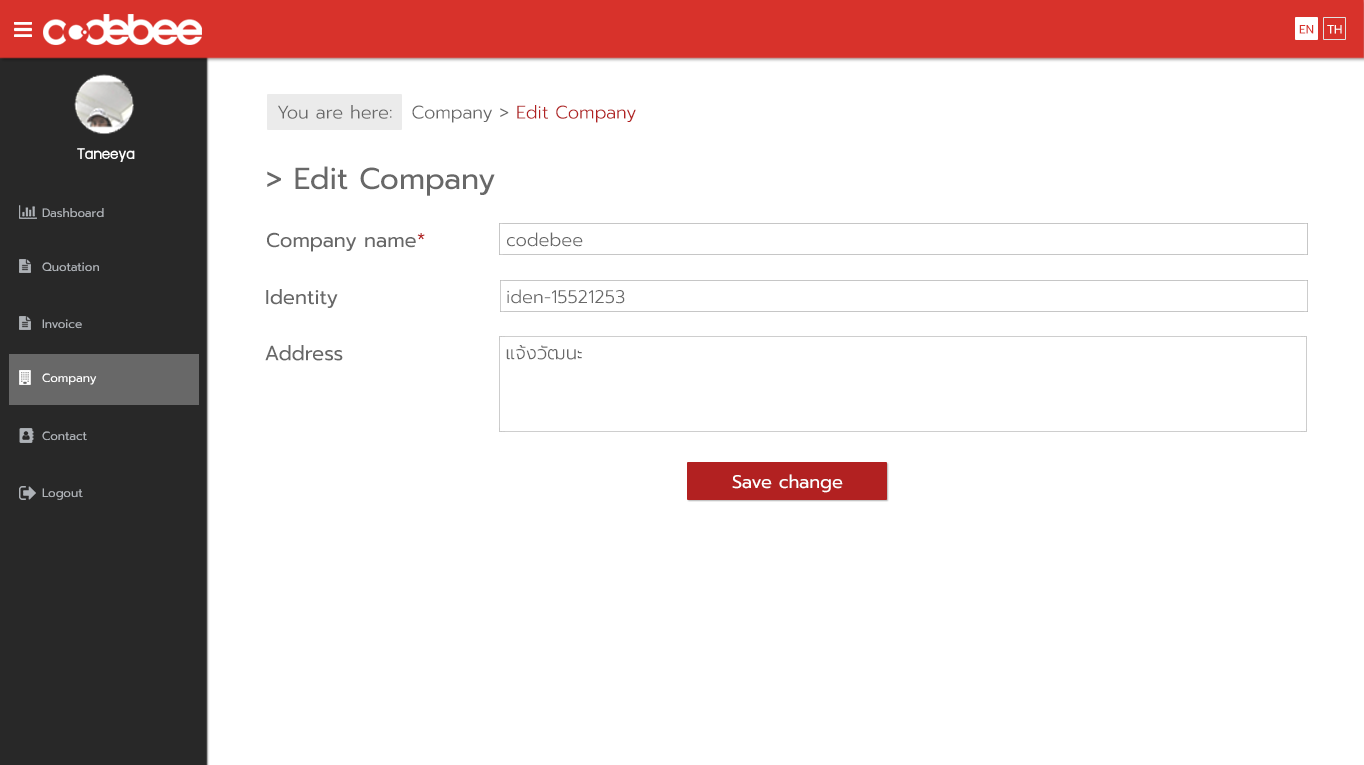
<style>
.page{position:relative;width:1364px;height:765px;background:#ffffff}
.page>*{position:absolute;margin:0}
.t1{font:12px "Prompt-Regular";color:#d8322b}
.t2{font:12px "Prompt-Regular";color:#ffffff}
.t3{font:18px "Prompt-Light";color:#686868}
.t4{font:18px "Prompt-Light";color:#b22121}
.t5{font:18px "supermarket";color:#ffffff}
.t6{font:30px "Prompt-Regular";color:#686868}
.t7{font:12px "Prompt-Regular";color:#aeb2b7}
.t8{font:20px "Prompt-Regular";color:#686868}
.t9{font:20px "Prompt-Regular";color:#b22121}
.t10{font:20.5px "Prompt-Regular";color:#686868}
.t11{font:18.5px "Prompt-Light";color:#686868}
.t12{font:18px "Prompt-Regular";color:#ffffff}
</style>
<div class="page">
<p class="t1" style="left:1299px;top:25px;width:15px;height:9px">EN</p>
<p class="t2" style="left:1327px;top:25px;width:15px;height:9px">TH</p>
<p class="t3" style="left:278px;top:105px;width:114px;height:14px">You are here:</p>
<p class="t4" style="left:412px;top:105px;width:224px;height:18px"><span class="t3">Company &gt; </span>Edit Company</p>
<p class="t5" style="left:77px;top:148px;width:58px;height:14px">Taneeya</p>
<p class="t6" style="left:267px;top:166px;width:228px;height:30px">&gt; Edit Company</p>
<p class="t7" style="left:42px;top:208px;width:62px;height:10px">Dashboard</p>
<p class="t8" style="left:267px;top:232px;width:158px;height:20px">Company name<span class="t9">*</span></p>
<p class="t3" style="left:507px;top:232px;width:76px;height:15px">codebee</p>
<p class="t7" style="left:42px;top:262px;width:57px;height:10px">Quotation</p>
<p class="t8" style="left:266px;top:289px;width:72px;height:19px">Identity</p>
<p class="t3" style="left:507px;top:289px;width:118px;height:15px">iden-15521253</p>
<p class="t7" style="left:42px;top:319px;width:40px;height:10px">Invoice</p>
<p class="t10" style="left:265px;top:345px;width:78px;height:16px">Address</p>
<p class="t11" style="left:506px;top:345px;width:76px;height:15px">แจ้งวัฒนะ</p>
<p class="t2" style="left:42px;top:373px;width:55px;height:12px">Company</p>
<p class="t7" style="left:42px;top:431px;width:45px;height:10px">Contact</p>
<p class="t12" style="left:732px;top:474px;width:111px;height:19px">Save change</p>
<p class="t7" style="left:42px;top:488px;width:41px;height:12px">Logout</p>
</div>
